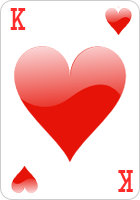
<style>
.page{position:relative;width:140px;height:200px;background:#ffffff}
.page>*{position:absolute;margin:0}
.t1{font:26px "CardCharacters";color:#ff2b2b}
</style>
<div class="page">
<p class="t1" style="left:10px;top:8px;width:16px;height:22px">k</p>
<p class="t1" style="left:118px;top:170px;width:15px;height:22px;rotate:180deg">k</p>
</div>
